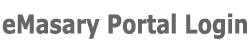
<style>
.page{position:relative;width:250px;height:50px;background:#ffffff}
.page>*{position:absolute;margin:0}
.t1{font:26px "Verdana-Bold";color:#666666;scale:0.8 1}
</style>
<div class="page">
<p class="t1" style="left:2px;top:13px;width:245px;height:26px">eMasary Portal Login</p>
</div>
